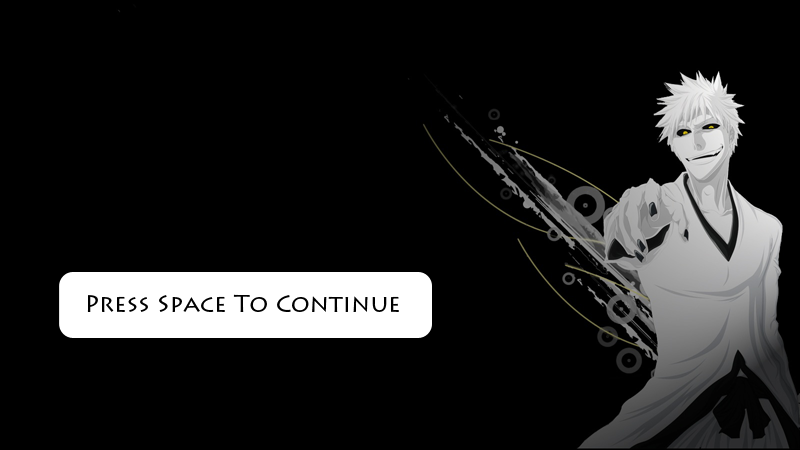
<style>
.page{position:relative;width:800px;height:450px;background:#000000}
.page>*{position:absolute;margin:0}
.t1{font:24px "LithosPro-Regular";color:#000000}
</style>
<div class="page">
<p class="t1" style="left:87px;top:294px;width:312px;height:18px">Press Space To Continue</p>
</div>
